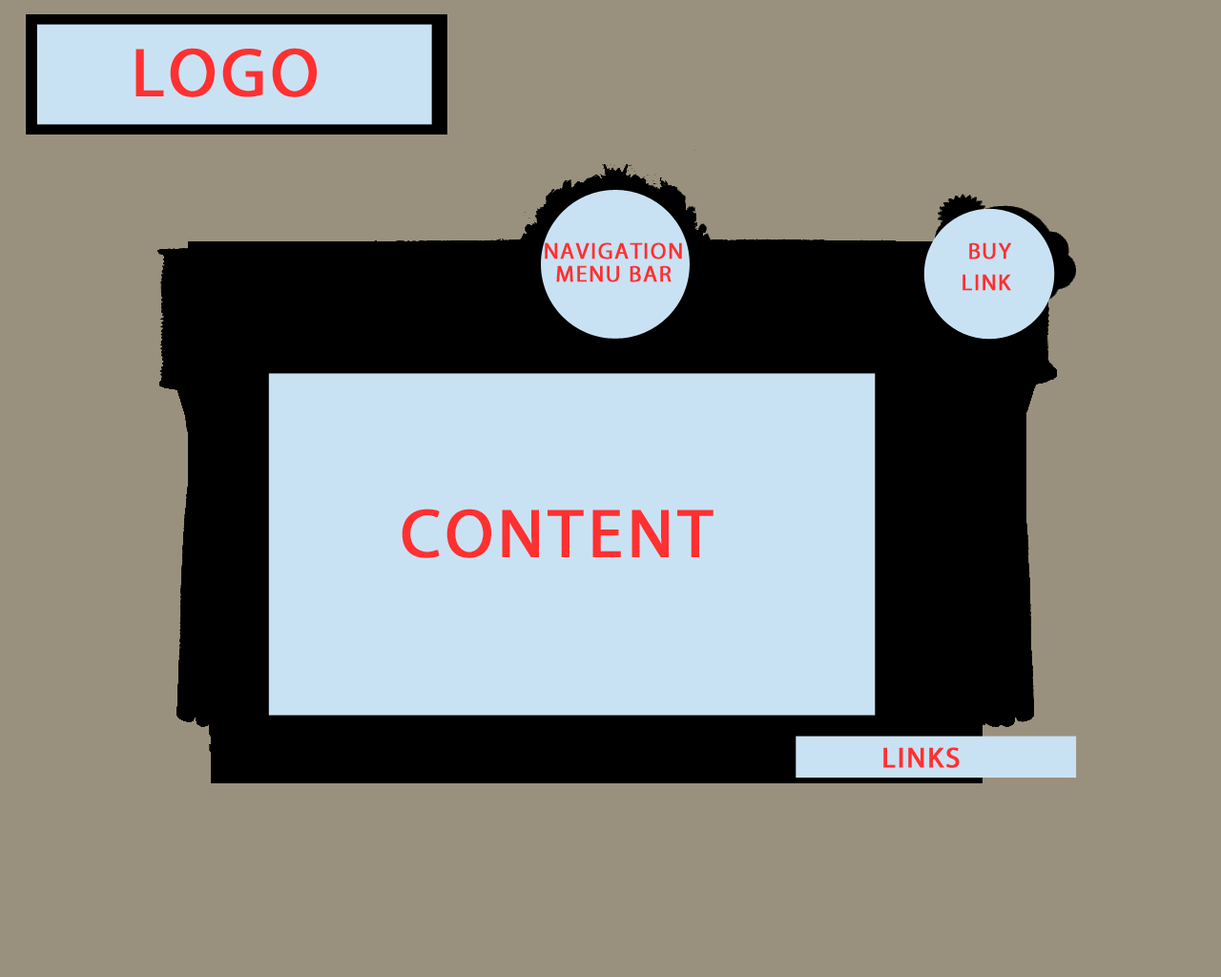
<style>
.page{position:relative;width:1221px;height:977px;background:#99917d}
.page>*{position:absolute;margin:0}
.t1{font:68.7px "MyriadPro-Regular";letter-spacing:0.05em;color:#ff3030;text-transform:uppercase;font-weight:bold}
.t2{font:22.9px "MyriadPro-Regular";letter-spacing:0.05em;color:#ff3030;text-transform:uppercase;font-weight:bold}
.t3{font:28.6px "MyriadPro-Regular";letter-spacing:0.05em;color:#ff3030;text-transform:uppercase;font-weight:bold}
</style>
<div class="page">
<p class="t1" style="left:135px;top:48px;width:182px;height:49px">LOGO</p>
<p class="t2" style="left:545px;top:242px;width:137px;height:17px">Navigation</p>
<p class="t2" style="left:969px;top:242px;width:43px;height:17px">Buy</p>
<p class="t2" style="left:556px;top:265px;width:115px;height:17px">Menu Bar</p>
<p class="t2" style="left:962px;top:274px;width:49px;height:17px">Link</p>
<p class="t1" style="left:402px;top:508px;width:311px;height:50px">Content</p>
<p class="t3" style="left:883px;top:747px;width:77px;height:21px">Links</p>
</div>
